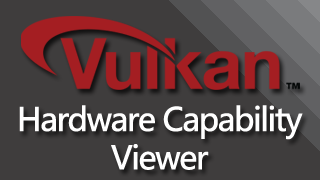
<style>
.page{position:relative;width:320px;height:180px;background:#3f3d3d}
.page>*{position:absolute;margin:0}
.t1{font:32px "YuGothic-Bold";letter-spacing:-0.075em;color:#ffffff;font-weight:bold}
</style>
<div class="page">
<p class="t1" style="left:19px;top:105px;width:284px;height:65px;text-align:center">Hardware Capability<br>Viewer</p>
</div>
